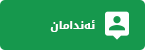
<style>
.page{position:relative;width:145px;height:50px;background:#16984d}
.page>*{position:absolute;margin:0}
.t1{font:11px "DroidArabicKufi-Bold";color:#ffffff}
</style>
<div class="page">
<p class="t1" style="left:50px;top:20px;width:45px;height:12px">ئەندامان</p>
</div>
